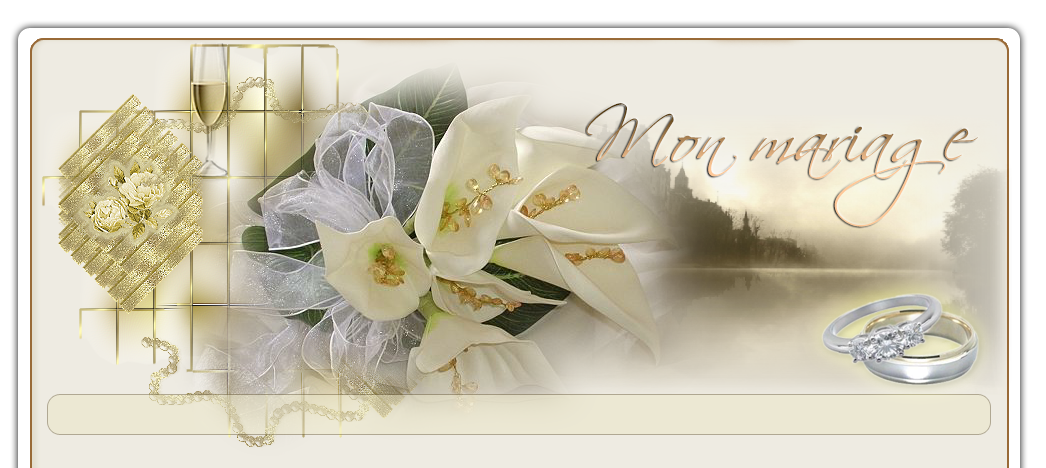
<style>
.page{position:relative;width:1046px;height:468px}
.page>*{position:absolute;margin:0}
.t1{font:72px/234.5px "Scriptina"}
</style>
<div class="page">
<p class="t1" style="left:586px;top:103px;width:392px;height:124px">Mon mariage</p>
</div>
